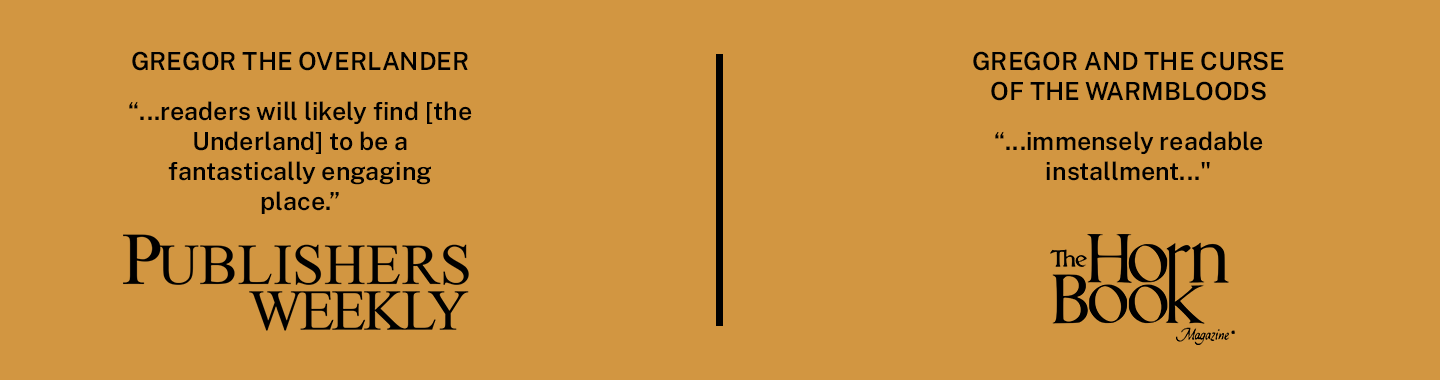
<style>
.page{position:relative;width:1440px;height:380px;background:#d29641}
.page>*{position:absolute;margin:0}
.t1{font:25px "PublicSans-SemiBold";color:#000000}
.t2{font:16.7px "PublicSans-SemiBold";color:#d29641}
</style>
<div class="page">
<p class="t1" style="left:129px;top:51px;width:343px;height:163px;text-align:center">GREGOR THE OVERLANDER<br><span class="t2">.<br></span>“...readers will likely find [the Underland] to be a fantastically engaging place.”</p>
<p class="t1" style="left:973px;top:51px;width:311px;height:130px;text-align:center">GREGOR AND THE CURSE OF THE WARMBLOODS<br><span class="t2">.<br></span>“...immensely readable installment..."</p>
</div>
